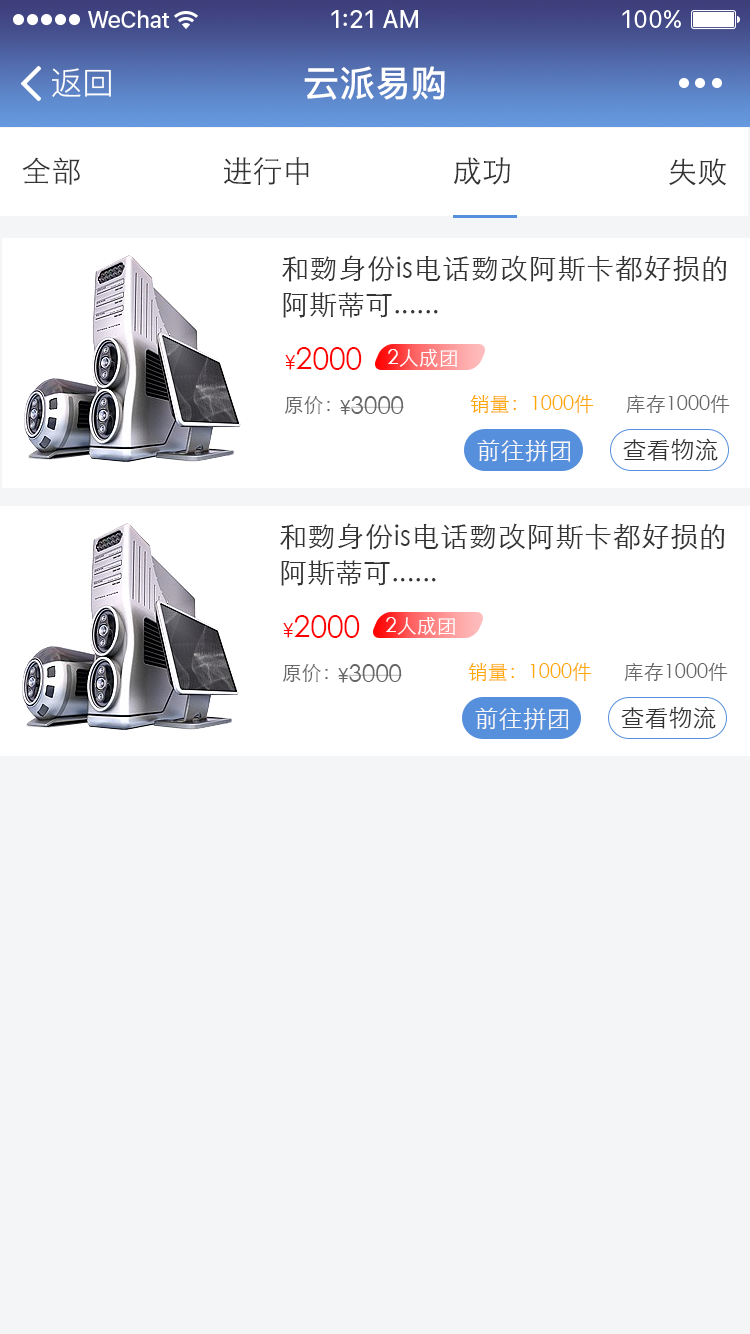
<style>
.page{position:relative;width:750px;height:1334px;background:#f4f5f6}
.page>*{position:absolute;margin:0}
.t1{font:32px "PingFang-SC-Regular";color:#ffffff}
.t2{font:36px "PingFang-SC-Bold";color:#ffffff}
.t3{font:30px "STXihei";color:#333333}
.t4{font:28px/36px "STXihei";color:#333333}
.t5{font:30px "STXihei";color:#ff0000}
.t6{font:20px "STXihei";color:#ff0000}
.t7{font:20px "STXihei";color:#ffffff}
.t8{font:20px "STXihei";color:#666666}
.t9{font:24px "STXihei";color:#666666}
.t10{font:20px "STXihei";color:#ffa800}
.t11{font:24px "STXihei";color:#333333}
.t12{font:24px "STXihei";color:#f7f7f7}
</style>
<div class="page">
<p class="t1" style="left:52px;top:68px;width:59px;height:29px">返回</p>
<p class="t2" style="left:304px;top:66px;width:141px;height:34px">云派易购</p>
<p class="t3" style="left:22px;top:157px;width:58px;height:28px">全部</p>
<p class="t3" style="left:224px;top:157px;width:85px;height:28px">进行中</p>
<p class="t3" style="left:453px;top:157px;width:57px;height:28px">成功</p>
<p class="t3" style="left:669px;top:158px;width:58px;height:28px">失败</p>
<p class="t4" style="left:282px;top:255px;width:445px;height:63px;text-align:justify">和覅身份is电话覅改阿斯卡都好损的阿斯蒂可......</p>
<p class="t5" style="left:285px;top:347px;width:77px;height:23px"><span class="t6">¥</span>2000</p>
<p class="t7" style="left:388px;top:349px;width:69px;height:18px">2人成团</p>
<p class="t8" style="left:284px;top:396px;width:46px;height:19px">原价：</p>
<p class="t9" style="left:339px;top:396px;width:65px;height:19px"><span class="t8">¥</span>3000</p>
<p class="t10" style="left:470px;top:394px;width:124px;height:19px">销量：1000件</p>
<p class="t8" style="left:626px;top:394px;width:104px;height:19px">库存1000件</p>
<p class="t11" style="left:623px;top:438px;width:95px;height:23px">查看物流</p>
<p class="t12" style="left:477px;top:439px;width:94px;height:23px">前往拼团</p>
<p class="t4" style="left:280px;top:523px;width:445px;height:63px;text-align:justify">和覅身份is电话覅改阿斯卡都好损的阿斯蒂可......</p>
<p class="t5" style="left:283px;top:615px;width:77px;height:23px"><span class="t6">¥</span>2000</p>
<p class="t7" style="left:386px;top:617px;width:69px;height:18px">2人成团</p>
<p class="t8" style="left:282px;top:664px;width:46px;height:19px">原价：</p>
<p class="t9" style="left:337px;top:664px;width:65px;height:19px"><span class="t8">¥</span>3000</p>
<p class="t10" style="left:468px;top:662px;width:124px;height:19px">销量：1000件</p>
<p class="t8" style="left:624px;top:662px;width:104px;height:19px">库存1000件</p>
<p class="t12" style="left:475px;top:707px;width:94px;height:23px">前往拼团</p>
<p class="t11" style="left:621px;top:706px;width:95px;height:23px">查看物流</p>
</div>
